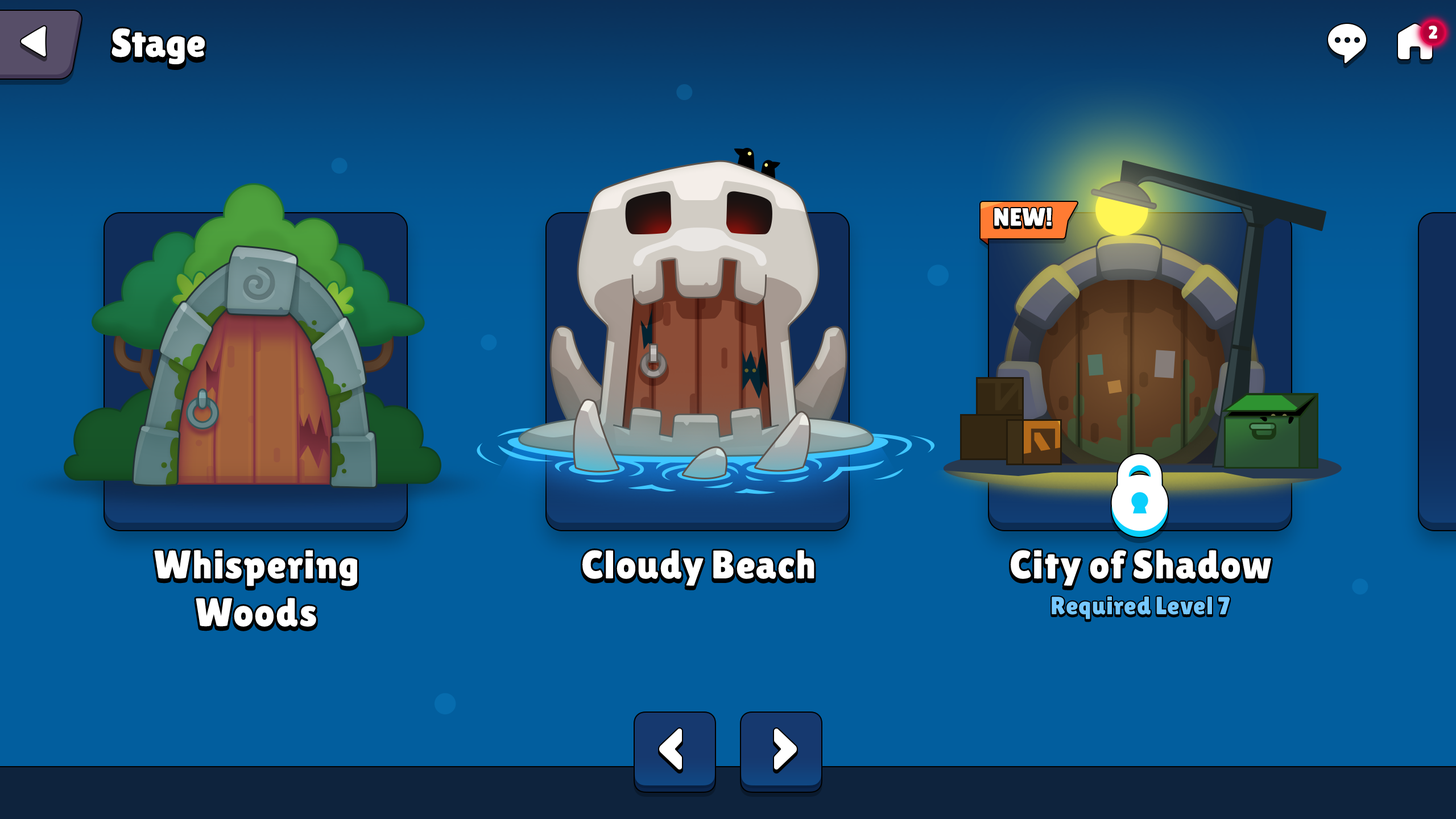
<style>
.page{position:relative;width:1456px;height:819px;background:#025e9e}
.page>*{position:absolute;margin:0}
.t1{font:39.8px "LilitaOne";color:#ffffff}
.t2{font:18.2px "LilitaOne";color:#ffffff;text-transform:uppercase}
.t3{font:25px "LilitaOne";color:#ffffff;text-transform:uppercase}
.t4{font:25px "LilitaOne";color:#76c7ff}
</style>
<div class="page">
<p class="t1" style="left:111px;top:28px;width:94px;height:36px">Stage</p>
<p class="t2" style="left:1429px;top:26px;width:8px;height:13px">2</p>
<p class="t3" style="left:994px;top:208px;width:58px;height:18px">New!</p>
<p class="t1" style="left:154px;top:550px;width:203px;height:77px;text-align:center">Whispering<br>Woods</p>
<p class="t1" style="left:582px;top:550px;width:232px;height:36px">Cloudy Beach</p>
<p class="t1" style="left:1011px;top:550px;width:260px;height:36px">City of Shadow</p>
<p class="t4" style="left:1052px;top:596px;width:178px;height:23px">Required Level 7</p>
</div>
